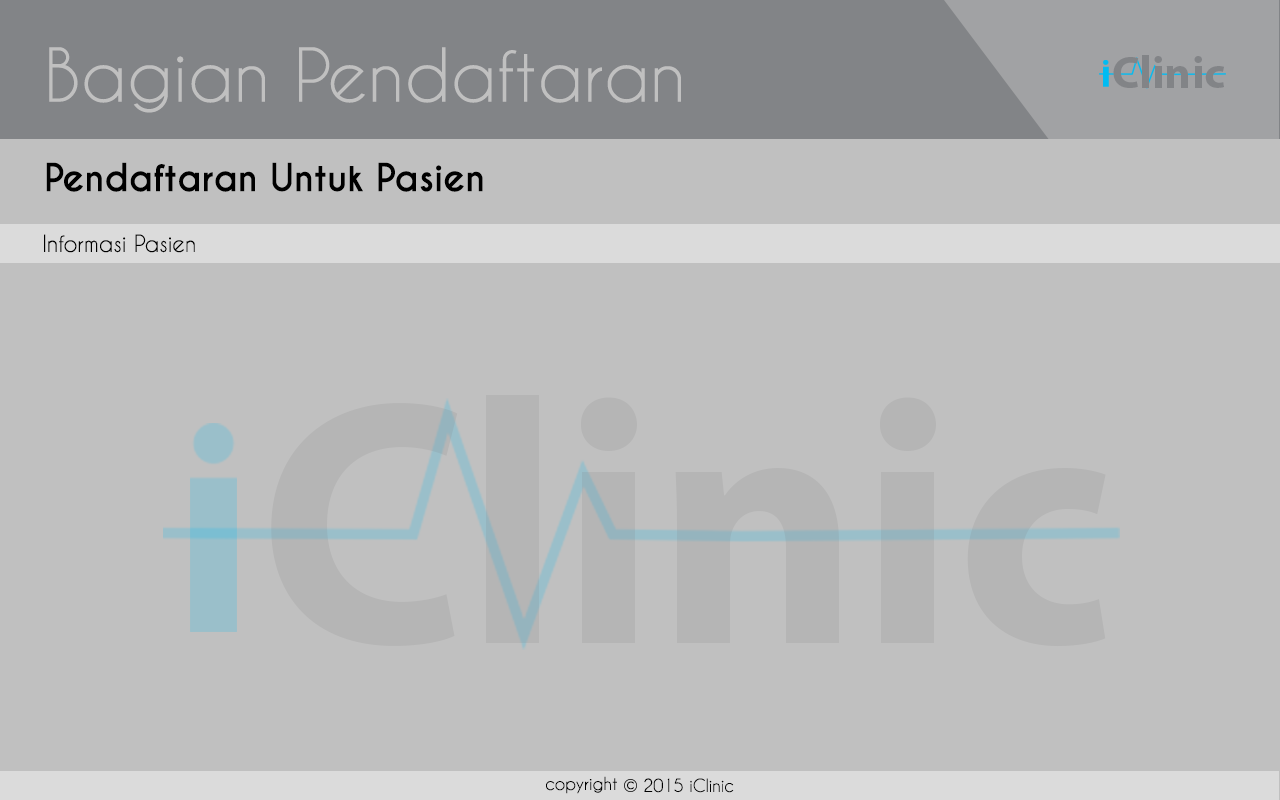
<style>
.page{position:relative;width:1280px;height:800px;background:#c0c0c0}
.page>*{position:absolute;margin:0}
.t1{font:69.4px "CaviarDreams";color:#c0c0c0}
.t2{font:45.1px "MyriadPro-Bold";color:#828487}
.t3{font:36.1px "CaviarDreams-Bold";color:#000000}
.t4{font:22.2px "CaviarDreams";color:#000000}
.t5{font:350px "MyriadPro-Bold";color:#b5b5b5}
.t6{font:16.8px "CaviarDreams";color:#000000}
.t7{font:14.3px "CaviarDreams";color:#000000}
.t8{font:16.9px "CaviarDreams";color:#000000}
</style>
<div class="page">
<p class="t1" style="left:49px;top:47px;width:632px;height:66px">Bagian Pendaftaran</p>
<p class="t2" style="left:1113px;top:55px;width:111px;height:33px">Clinic</p>
<p class="t3" style="left:46px;top:162px;width:437px;height:30px">Pendaftaran Untuk Pasien</p>
<p class="t4" style="left:44px;top:234px;width:151px;height:19px">Informasi Pasien</p>
<p class="t5" style="left:271px;top:395px;width:835px;height:252px">Clinic</p>
<p class="t6" style="left:546px;top:776px;width:71px;height:18px">copyright</p>
<p class="t7" style="left:627px;top:781px;width:7px;height:9px">c</p>
<p class="t8" style="left:644px;top:778px;width:90px;height:15px">2015 iClinic</p>
</div>
